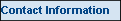
<style>
.page{position:relative;width:121px;height:21px;background:#d5e4f2}
.page>*{position:absolute;margin:0}
.t1{font:11px "Arial-BoldMT";color:#064787}
</style>
<div class="page">
<p class="t1" style="left:1px;top:6px;width:108px;height:8px">Contact Information</p>
</div>
